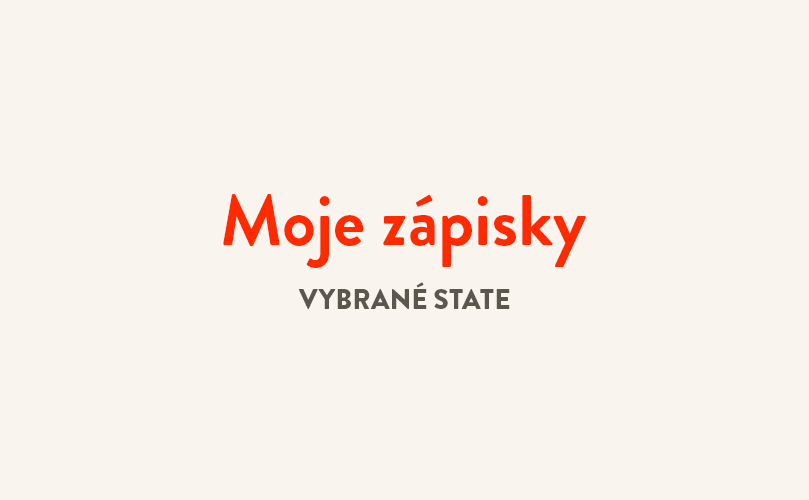
<style>
.page{position:relative;width:809px;height:500px;background:#f9f5ee}
.page>*{position:absolute;margin:0}
.t1{font:72px "BrandonGrotesque-Bold";color:#ff2b00}
.t2{font:28px "BrandonGrotesque-Black";color:#595a63}
</style>
<div class="page">
<p class="t1" style="left:223px;top:194px;width:363px;height:74px">Moje zápisky</p>
<p class="t2" style="left:298px;top:282px;width:212px;height:27px">VYBRANÉ STATE</p>
</div>
